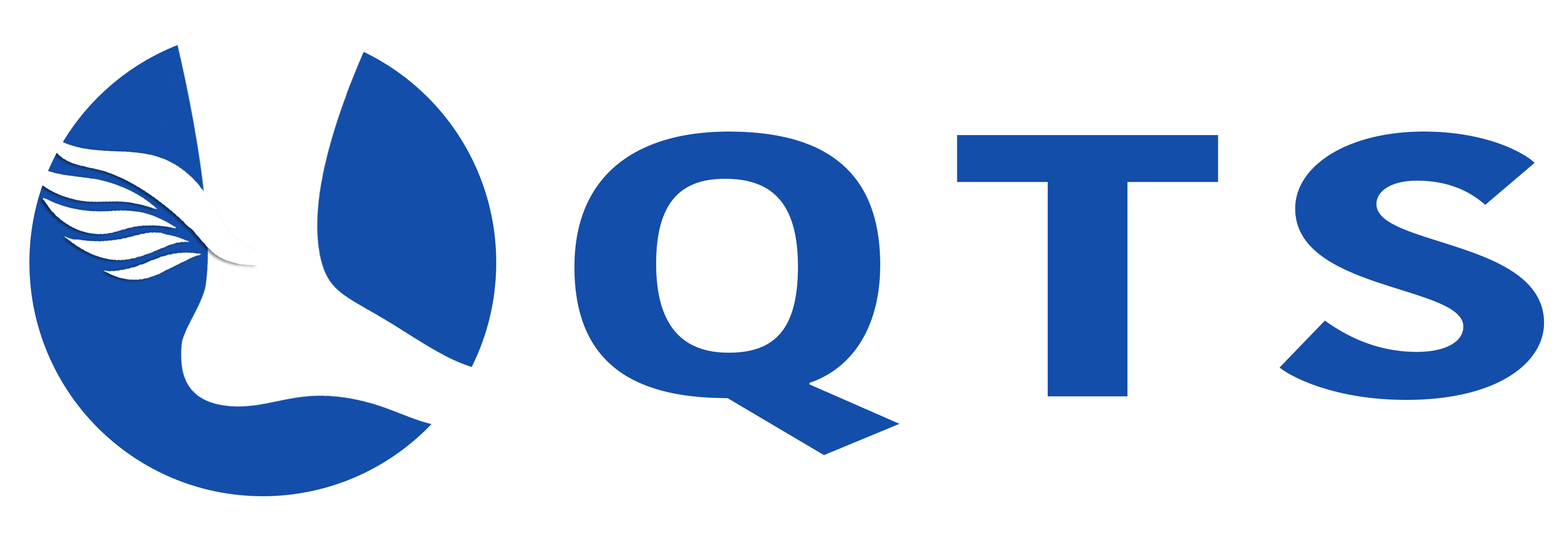
<style>
.page{position:relative;width:1568px;height:535px;background:#ffffff}
.page>*{position:absolute;margin:0}
.t1{font:372.1px "KohinoorBangla-Bold";letter-spacing:0.1em;color:#134eab;scale:1.4 1}
</style>
<div class="page">
<p class="t1" style="left:574px;top:131px;width:970px;height:324px">QTS</p>
</div>
